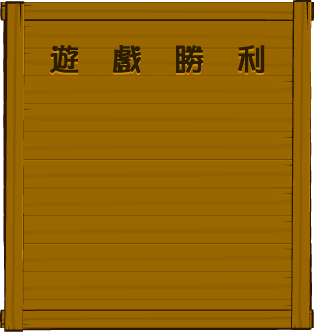
<style>
.page{position:relative;width:314px;height:332px;background:#996600}
.page>*{position:absolute;margin:0}
.t1{font:30px "Pop2EG-Bold-T-GB";font-weight:bold}
.t2{font:30px "Pop2EG-Bold-T-GB";color:#2b1d00;font-weight:bold}
</style>
<div class="page">
<p class="t1" style="left:50px;top:47px;width:215px;height:28px">游  戏  胜  利</p>
<p class="t2" style="left:50px;top:45px;width:215px;height:28px">游  戏  胜  利</p>
</div>
